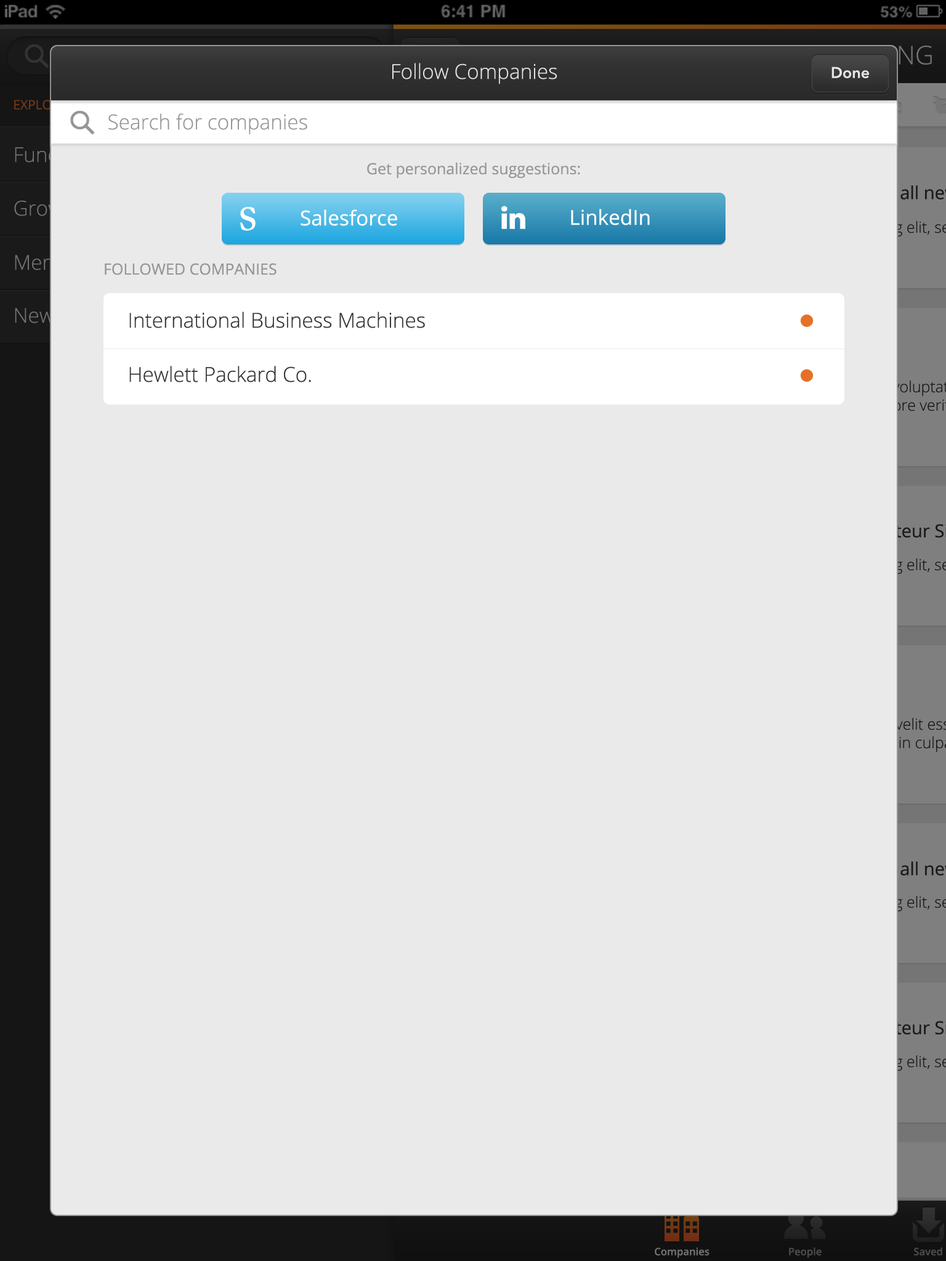
<style>
.page{position:relative;width:946px;height:1261px;background:#eaeaea}
.page>*{position:absolute;margin:0}
.t1{font:20.5px "OpenSans-Light";color:#e5e5e5}
.t2{font:15.4px "AvenirNext-DemiBold";color:#e5e5e5}
.t3{font:20.5px "OpenSans-Light";color:#969696}
.t4{font:15.4px "OpenSans";color:#969696}
.t5{font:20.5px "OpenSans";color:#ffffff}
.t6{font:20.5px "OpenSans-Light";color:#343434}
</style>
<div class="page">
<p class="t1" style="left:392px;top:63px;width:165px;height:21px">Follow Companies</p>
<p class="t2" style="left:831px;top:66px;width:38px;height:12px">Done</p>
<p class="t3" style="left:108px;top:113px;width:199px;height:22px">Search for companies</p>
<p class="t4" style="left:367px;top:163px;width:213px;height:16px">Get personalized suggestions:</p>
<p class="t5" style="left:300px;top:209px;width:97px;height:17px">Salesforce</p>
<p class="t5" style="left:571px;top:209px;width:79px;height:16px">LinkedIn</p>
<p class="t4" style="left:105px;top:263px;width:171px;height:12px">FOLLOWED COMPANIES</p>
<p class="t6" style="left:129px;top:312px;width:296px;height:16px">International Business Machines</p>
<p class="t6" style="left:129px;top:366px;width:182px;height:16px">Hewlett Packard Co.</p>
</div>
